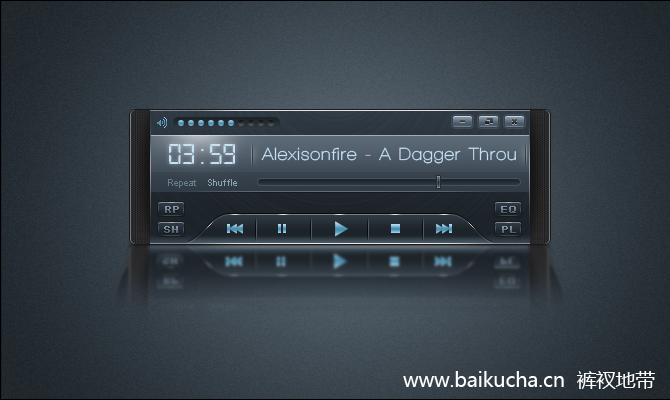
<style>
.page{position:relative;width:670px;height:400px}
.page>*{position:absolute;margin:0}
.t1{font:30px "Digital-7Mono";color:#c5e2f7}
.t2{font:18px "WalkwayBold";letter-spacing:0.05em;color:#c5e2f7}
.t3{font:9px "ArialMT";color:#697c8a}
.t4{font:9px "ArialMT";color:#8ca3b4}
.t5{font:10px "ArialMT";font-weight:bold}
.t6{font:19.6px "MicrosoftYaHei";color:#ffffff}
</style>
<div class="page">
<p class="t1" style="left:169px;top:144px;width:66px;height:20px">03:59</p>
<p class="t2" style="left:261px;top:147px;width:255px;height:17px">Alexisonfire - A Dagger Throu</p>
<p class="t3" style="left:168px;top:179px;width:28px;height:9px">Repeat</p>
<p class="t4" style="left:208px;top:179px;width:29px;height:7px">Shuffle</p>
<p class="t5" style="left:165px;top:206px;width:14px;height:7px">RP</p>
<p class="t5" style="left:501px;top:206px;width:15px;height:7px">EQ</p>
<p class="t5" style="left:164px;top:226px;width:14px;height:7px">SH</p>
<p class="t5" style="left:502px;top:226px;width:14px;height:7px">PL</p>
<p class="t6" style="left:403px;top:371px;width:252px;height:18px">www.baikucha.cn  裤衩地带</p>
</div>
